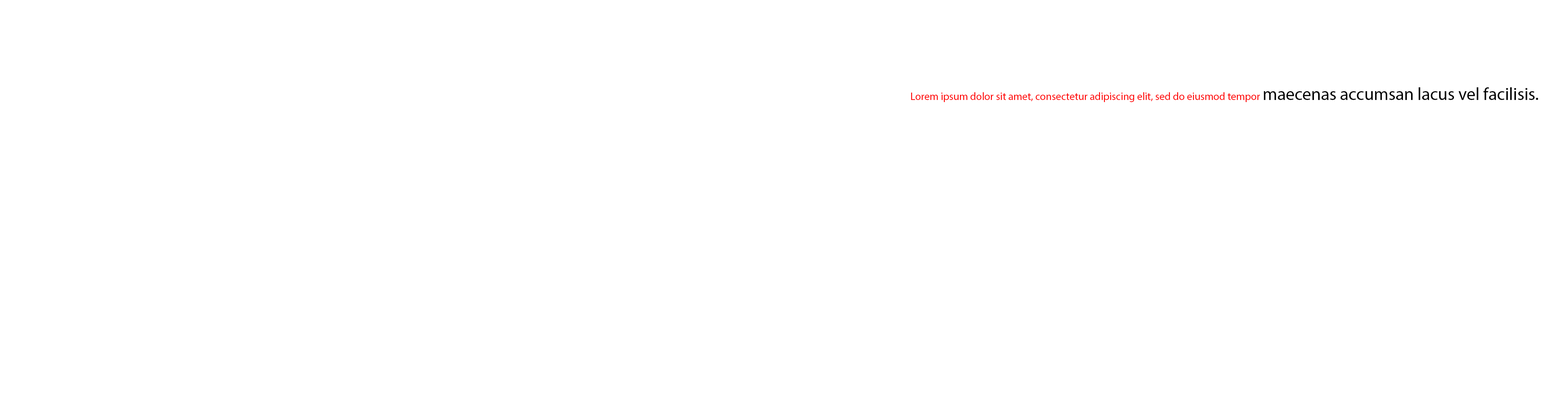
<style>
.page{position:relative;width:1568px;height:396px;background:#ffffff}
.page>*{position:absolute;margin:0}
.t1{font:10.6px "MyriadPro-Regular";color:#ff0000}
.t2{font:17.6px "MyriadPro-Regular";color:#000000}
</style>
<div class="page">
<p class="t1" style="left:911px;top:87px;width:627px;height:15px">Lorem ipsum dolor sit amet, consectetur adipiscing elit, sed do eiusmod tempor <span class="t2">maecenas accumsan lacus vel facilisis.</span></p>
</div>
